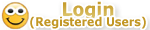
<style>
.page{position:relative;width:150px;height:30px;background:#ffffff}
.page>*{position:absolute;margin:0}
.t1{font:18.7px "Verdana-Bold";color:#d1b14e;scale:0.92 1}
.t2{font:12px "Verdana-Bold";color:#c29725;scale:0.92 1}
</style>
<div class="page">
<p class="t1" style="left:63px;top:1px;width:51px;height:19px">Login</p>
<p class="t2" style="left:30px;top:16px;width:116px;height:13px">(Registered Users)</p>
</div>
